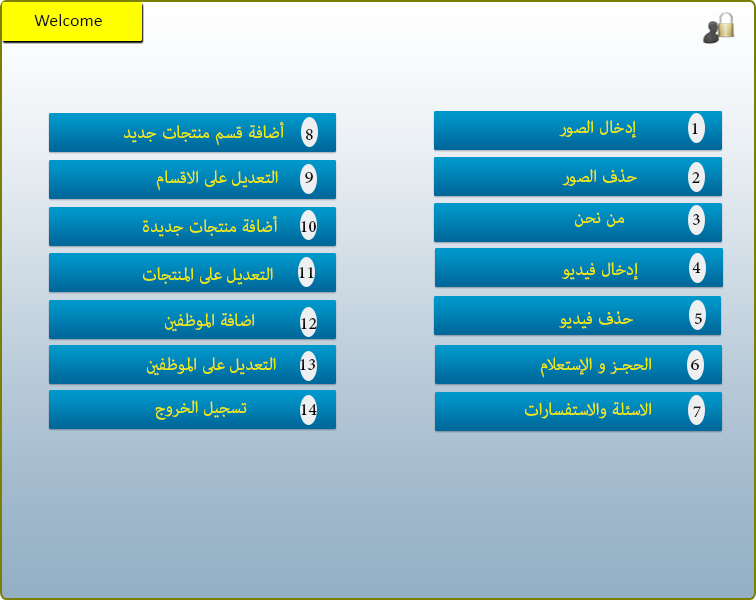
<style>
.page{position:relative;width:756px;height:600px}
.page>*{position:absolute;margin:0}
.t1{font:18px "Calibri";color:#0f0f0f}
.t2{font:24px "AdobeArabic-Regular";color:#eeeb07}
.t3{font:24px "AdobeArabic-Regular";color:#121212}
.t4{font:24px "AdobeArabic-Regular";color:#151515}
.t5{font:24px "AdobeArabic-Regular";color:#181818}
.t6{font:24px "AdobeArabic-Regular"}
.t7{font:24px "AdobeArabic-Regular";color:#131313}
.t8{font:24px "AdobeArabic-Regular";color:#101010}
.t9{font:24px "AdobeArabic-Regular";color:#0c0c0c}
.t10{font:24px "AdobeArabic-Regular";color:#111111}
.t11{font:24px "AdobeArabic-Regular";color:#1d1d1d}
.t12{font:24px "AdobeArabic-Regular";color:#141414}
.t13{font:24px "AdobeArabic-Regular";color:#0f0f0f}
.t14{font:24px "AdobeArabic-Regular";color:#232323}
</style>
<div class="page">
<p class="t1" style="left:34px;top:14px;width:68px;height:12px">Welcome</p>
<p class="t2" style="left:124px;top:122px;width:160px;height:24px">أضافة قسم منتجات جديد</p>
<p class="t2" style="left:559px;top:120px;width:77px;height:18px">إدخال الصور</p>
<p class="t3" style="left:692px;top:123px;width:6px;height:11px">1</p>
<p class="t4" style="left:306px;top:129px;width:7px;height:11px">8</p>
<p class="t2" style="left:156px;top:170px;width:122px;height:21px">التعديل على الاقسام</p>
<p class="t5" style="left:305px;top:172px;width:8px;height:11px">9</p>
<p class="t2" style="left:562px;top:169px;width:75px;height:17px">حذف الصور</p>
<p class="t6" style="left:692px;top:172px;width:8px;height:11px">2</p>
<p class="t2" style="left:143px;top:216px;width:135px;height:21px">أضافة منتجات جديدة</p>
<p class="t7" style="left:301px;top:221px;width:15px;height:11px">10</p>
<p class="t2" style="left:575px;top:212px;width:50px;height:15px">من نحن</p>
<p class="t4" style="left:693px;top:214px;width:7px;height:11px">3</p>
<p class="t2" style="left:143px;top:267px;width:130px;height:18px">التعديل على المنتجات</p>
<p class="t8" style="left:299px;top:267px;width:15px;height:11px">11</p>
<p class="t2" style="left:562px;top:262px;width:76px;height:18px">إدخال فيديو</p>
<p class="t9" style="left:692px;top:262px;width:9px;height:11px">4</p>
<p class="t2" style="left:165px;top:312px;width:89px;height:20px">اضافة الموظفين</p>
<p class="t10" style="left:301px;top:318px;width:16px;height:11px">12</p>
<p class="t2" style="left:559px;top:311px;width:74px;height:18px">حذف فيديو</p>
<p class="t11" style="left:694px;top:313px;width:8px;height:11px">5</p>
<p class="t2" style="left:147px;top:356px;width:129px;height:20px">التعديل على الموظفين</p>
<p class="t12" style="left:300px;top:359px;width:15px;height:11px">13</p>
<p class="t2" style="left:540px;top:357px;width:111px;height:21px">الحجـز و الإستعلام</p>
<p class="t13" style="left:691px;top:359px;width:8px;height:11px">6</p>
<p class="t2" style="left:155px;top:400px;width:92px;height:20px">تسجيل الخروج</p>
<p class="t9" style="left:301px;top:404px;width:16px;height:11px">14</p>
<p class="t2" style="left:525px;top:402px;width:126px;height:17px">الاسئلة والاستفسارات</p>
<p class="t14" style="left:693px;top:406px;width:8px;height:11px">7</p>
</div>
